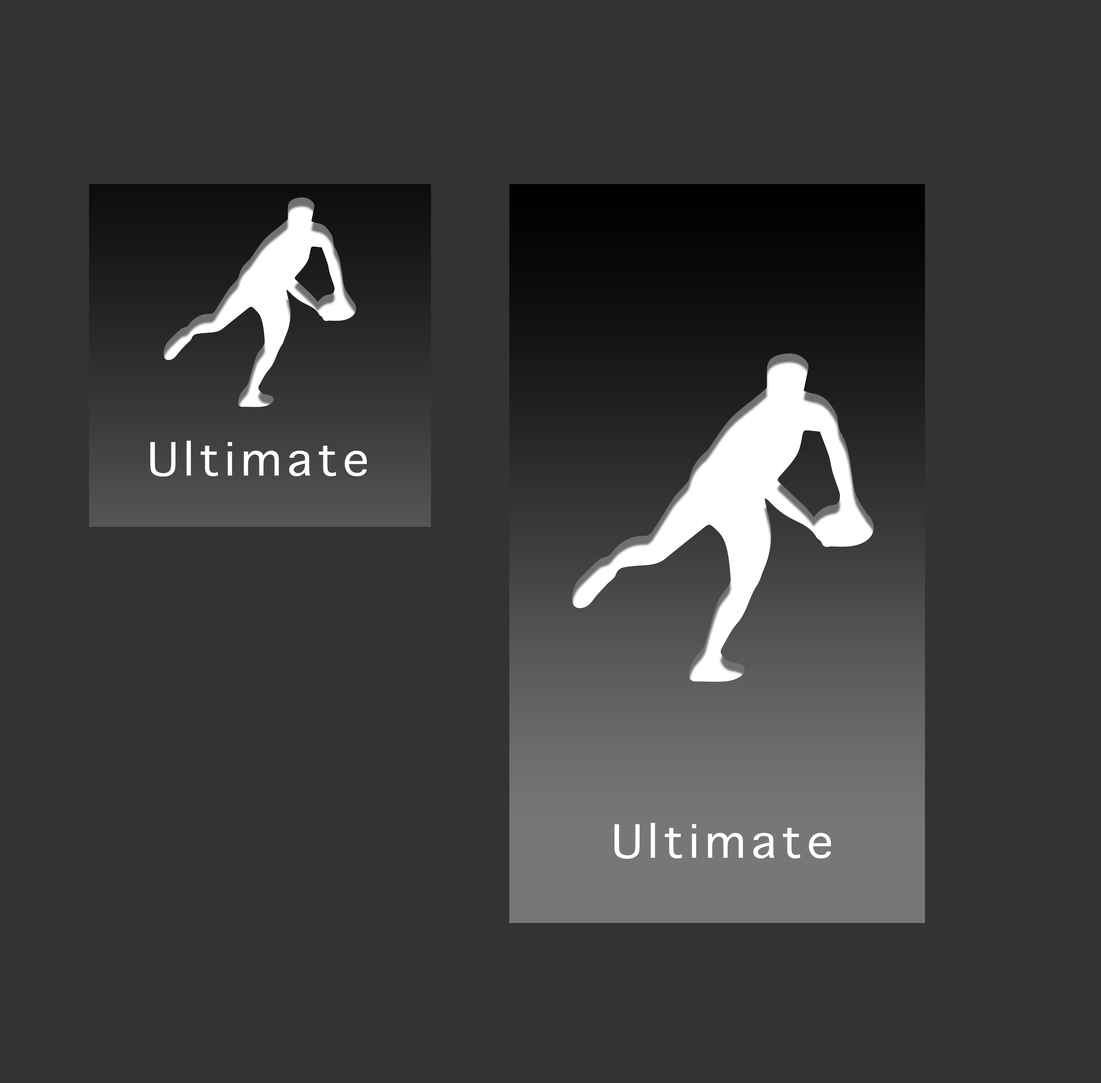
<style>
.page{position:relative;width:1101px;height:1083px;background:#333333}
.page>*{position:absolute;margin:0}
.t1{font:44.2px "Thonburi";letter-spacing:0.11em;color:#ffffff;scale:1.04 1}
</style>
<div class="page">
<p class="t1" style="left:150px;top:440px;width:217px;height:37px">Ultimate</p>
<p class="t1" style="left:614px;top:823px;width:217px;height:36px">Ultimate</p>
</div>
